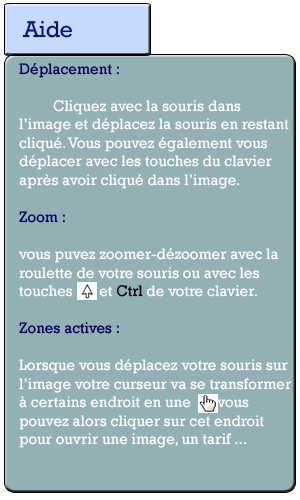
<style>
.page{position:relative;width:300px;height:500px;background:#93b0b5}
.page>*{position:absolute;margin:0}
.t1{font:15.4px "Rockwell";color:#ffffff}
.t2{font:23.2px "Rockwell";color:#001677}
.t3{font:15.4px "Rockwell";color:#02005c}
.t4{font:15.4px "Rockwell";color:#fffdfd}
.t5{font:15.4px "Rockwell";color:#000000}
</style>
<div class="page">
<p class="t1" style="left:18px;top:20px;width:274px;height:428px"><span class="t2">Aide<br><br></span><span class="t3">Déplacement : <br><br> </span><span class="t4">Cliquez avec la souris dans l’image et déplacez la souris en restant cliqué. Vous pouvez également vous déplacer avec les touches du clavier après avoir cliqué dans l’image.<br><br></span><span class="t3">Zoom :<br><br></span>vous puvez zoomer-dézoomer avec la roulette de votre souris ou avec les touches       et <span class="t5">Ctrl</span> de votre clavier.<br><br><span class="t3">Zones actives :<br><br></span>Lorsque vous déplacez votre souris sur l’image votre curseur va se transformer à certains endroit en une       vous pouvez alors cliquer sur cet endroit pour ouvrir une image, un tarif ...</p>
</div>
